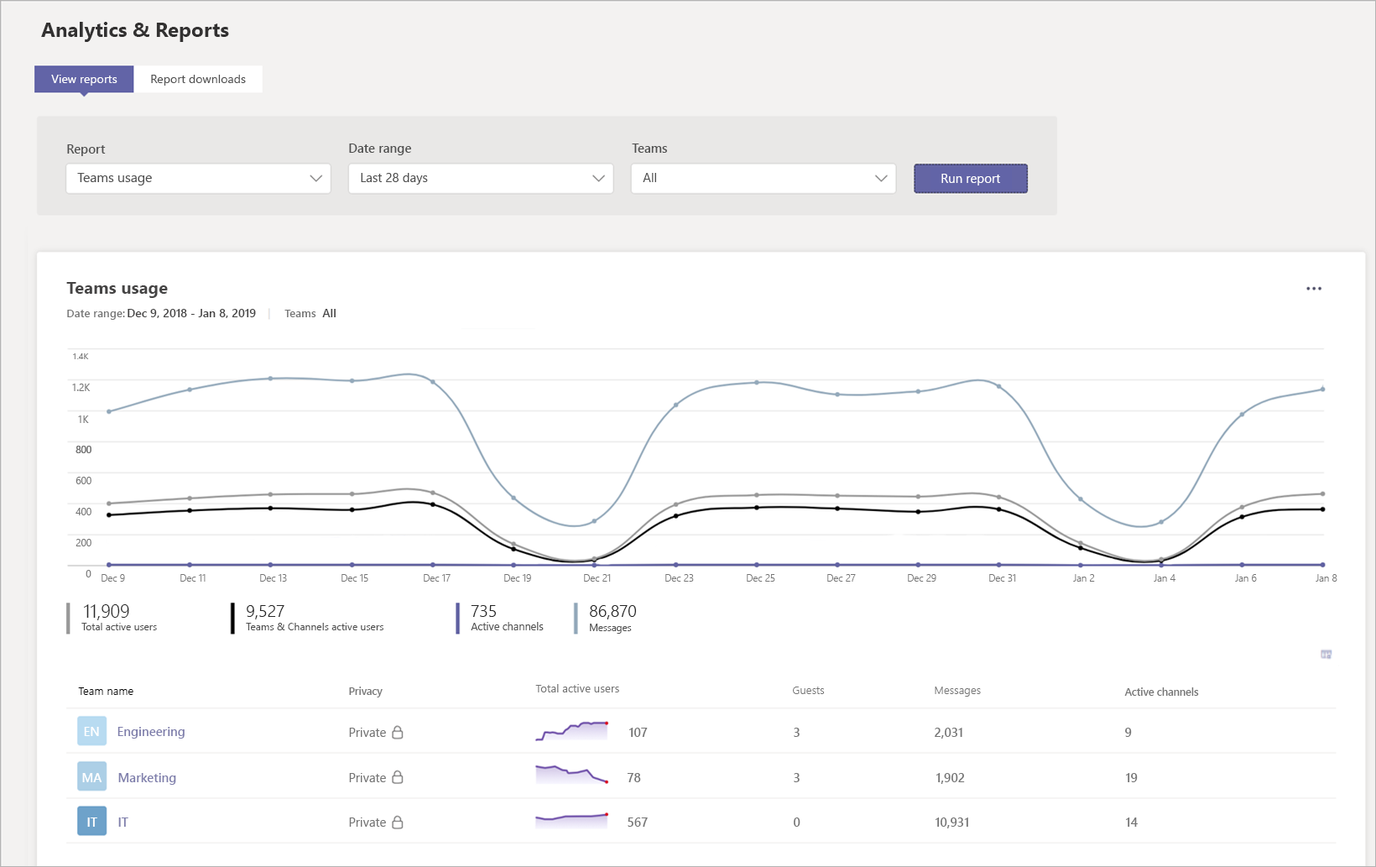
<style>
.page{position:relative;width:1376px;height:867px;background:#ffffff}
.page>*{position:absolute;margin:0}
.t1{font:20.1px "SegoeUI-Bold";color:#323131}
.t2{font:11.9px "SegoeUI";color:#ffffff}
.t3{font:11.9px "SegoeUI";color:#505050}
.t4{font:12.6px "SegoeUI-Semibold";color:#505050}
.t5{font:13.3px "SegoeUI";color:#505050}
.t6{font:12.6px "SegoeUI";color:#505050}
.t7{font:12.6px "SegoeUI";color:#ffffff}
.t8{font:17.1px "SegoeUI-Bold";color:#454444}
.t9{font:11.2px "SegoeUI-Semibold";color:#757575}
.t10{font:11.7px "SegoeUI-Semibold";color:#454444}
.t11{font:8.7px "SegoeUI";color:#757575}
.t12{font:9.8px "SegoeUI";color:#757575}
.t13{font:9.8px "SegoeUI-Semilight";color:#757575}
.t14{font:18.2px "SegoeUI-Semilight";color:#272727}
.t15{font:16.8px "SegoeUI-Semilight";color:#272727}
.t16{font:10.1px "SegoeUI";color:#505050}
.t17{font:10.2px "SegoeUI";color:#505050}
.t18{font:10.6px "SegoeUI";color:#505050}
.t19{font:9.8px "SegoeUI";color:#505050}
.t20{font:11.2px "SegoeUI-Semilight";color:#000000}
.t21{font:10.5px "SegoeUI-Semibold";color:#757575}
.t22{font:11.2px "SegoeUI";color:#757575}
.t23{font:11.2px "SegoeUI-Semilight";color:#757575}
.t24{font:12.6px "SegoeUI-Semibold";color:#ffffff}
.t25{font:12.6px "SegoeUI-Semibold";color:#7f7fac}
.t26{font:12.6px "SegoeUI";color:#757575}
.t27{font:12.6px "SegoeUI-Semibold";color:#757575}
</style>
<div class="page">
<p class="t1" style="left:41px;top:22px;width:188px;height:20px">Analytics &amp; Reports</p>
<p class="t2" style="left:51px;top:75px;width:66px;height:11px">View reports</p>
<p class="t3" style="left:151px;top:75px;width:95px;height:11px">Report downloads</p>
<p class="t4" style="left:67px;top:144px;width:39px;height:12px">Report</p>
<p class="t4" style="left:349px;top:143px;width:62px;height:12px">Date range</p>
<p class="t4" style="left:632px;top:143px;width:35px;height:10px">Teams</p>
<p class="t5" style="left:77px;top:173px;width:75px;height:12px">Teams usage</p>
<p class="t6" style="left:361px;top:173px;width:67px;height:12px">Last 28 days</p>
<p class="t6" style="left:643px;top:173px;width:13px;height:9px">All</p>
<p class="t7" style="left:941px;top:174px;width:59px;height:11px">Run report</p>
<p class="t8" style="left:66px;top:282px;width:102px;height:16px">Teams usage</p>
<p class="t9" style="left:67px;top:310px;width:58px;height:10px">Date range:</p>
<p class="t10" style="left:128px;top:309px;width:128px;height:9px">Dec 9, 2018 - Jan 8, 2019</p>
<p class="t9" style="left:284px;top:310px;width:32px;height:7px">Teams</p>
<p class="t10" style="left:322px;top:309px;width:14px;height:8px">All</p>
<p class="t11" style="left:73px;top:353px;width:16px;height:6px">1.4K</p>
<p class="t12" style="left:72px;top:383px;width:19px;height:8px">1.2K</p>
<p class="t12" style="left:78px;top:415px;width:11px;height:8px">1K</p>
<p class="t12" style="left:76px;top:445px;width:15px;height:8px">800</p>
<p class="t12" style="left:76px;top:445px;width:15px;height:8px">800</p>
<p class="t12" style="left:76px;top:477px;width:15px;height:7px">600</p>
<p class="t12" style="left:76px;top:508px;width:15px;height:7px">400</p>
<p class="t12" style="left:76px;top:539px;width:15px;height:7px">200</p>
<p class="t12" style="left:86px;top:570px;width:5px;height:7px">0</p>
<p class="t13" style="left:102px;top:574px;width:23px;height:7px">Dec 9</p>
<p class="t13" style="left:180px;top:574px;width:26px;height:7px">Dec 11</p>
<p class="t13" style="left:260px;top:574px;width:27px;height:7px">Dec 13</p>
<p class="t13" style="left:341px;top:574px;width:27px;height:7px">Dec 15</p>
<p class="t13" style="left:424px;top:574px;width:27px;height:7px">Dec 17</p>
<p class="t13" style="left:504px;top:574px;width:27px;height:7px">Dec 19</p>
<p class="t13" style="left:584px;top:574px;width:27px;height:7px">Dec 21</p>
<p class="t13" style="left:665px;top:574px;width:29px;height:7px">Dec 23</p>
<p class="t13" style="left:747px;top:574px;width:28px;height:7px">Dec 25</p>
<p class="t13" style="left:827px;top:574px;width:29px;height:7px">Dec 27</p>
<p class="t13" style="left:908px;top:574px;width:28px;height:7px">Dec 29</p>
<p class="t13" style="left:989px;top:574px;width:27px;height:7px">Dec 31</p>
<p class="t13" style="left:1073px;top:574px;width:22px;height:7px">Jan 2</p>
<p class="t13" style="left:1154px;top:574px;width:21px;height:7px">Jan 4</p>
<p class="t13" style="left:1235px;top:574px;width:22px;height:7px">Jan 6</p>
<p class="t13" style="left:1316px;top:574px;width:21px;height:7px">Jan 8</p>
<p class="t14" style="left:84px;top:604px;width:45px;height:16px">11,909</p>
<p class="t15" style="left:247px;top:605px;width:37px;height:14px">9,527</p>
<p class="t15" style="left:471px;top:605px;width:25px;height:12px">735</p>
<p class="t15" style="left:590px;top:605px;width:46px;height:14px">86,870</p>
<p class="t16" style="left:81px;top:623px;width:76px;height:7px">Total active users</p>
<p class="t17" style="left:246px;top:623px;width:137px;height:7px">Teams &amp; Channels active users</p>
<p class="t18" style="left:471px;top:622px;width:73px;height:8px">Active channels</p>
<p class="t19" style="left:590px;top:623px;width:42px;height:10px">Messages</p>
<p class="t20" style="left:78px;top:687px;width:55px;height:8px">Team name</p>
<p class="t21" style="left:349px;top:686px;width:34px;height:11px">Privacy</p>
<p class="t22" style="left:535px;top:684px;width:84px;height:8px">Total active users</p>
<p class="t23" style="left:793px;top:686px;width:32px;height:8px">Guests</p>
<p class="t23" style="left:935px;top:686px;width:46px;height:10px">Messages</p>
<p class="t21" style="left:1124px;top:687px;width:75px;height:9px">Active channels</p>
<p class="t24" style="left:84px;top:727px;width:15px;height:9px">EN</p>
<p class="t25" style="left:117px;top:727px;width:68px;height:11px">Engineering</p>
<p class="t26" style="left:349px;top:727px;width:37px;height:10px">Private</p>
<p class="t27" style="left:629px;top:727px;width:19px;height:10px">107</p>
<p class="t27" style="left:794px;top:727px;width:6px;height:10px">3</p>
<p class="t27" style="left:935px;top:727px;width:27px;height:11px">2,031</p>
<p class="t27" style="left:1125px;top:727px;width:7px;height:10px">9</p>
<p class="t24" style="left:82px;top:773px;width:20px;height:9px">MA</p>
<p class="t25" style="left:118px;top:773px;width:58px;height:11px">Marketing</p>
<p class="t26" style="left:349px;top:773px;width:37px;height:9px">Private</p>
<p class="t27" style="left:627px;top:773px;width:14px;height:9px">78</p>
<p class="t27" style="left:794px;top:773px;width:6px;height:9px">3</p>
<p class="t27" style="left:936px;top:773px;width:29px;height:11px">1,902</p>
<p class="t27" style="left:1126px;top:773px;width:12px;height:9px">19</p>
<p class="t24" style="left:87px;top:817px;width:10px;height:9px">IT</p>
<p class="t25" style="left:118px;top:817px;width:10px;height:9px">IT</p>
<p class="t26" style="left:349px;top:817px;width:37px;height:9px">Private</p>
<p class="t27" style="left:628px;top:817px;width:20px;height:9px">567</p>
<p class="t27" style="left:794px;top:817px;width:6px;height:9px">0</p>
<p class="t27" style="left:935px;top:817px;width:33px;height:11px">10,931</p>
<p class="t27" style="left:1126px;top:817px;width:12px;height:9px">14</p>
</div>
